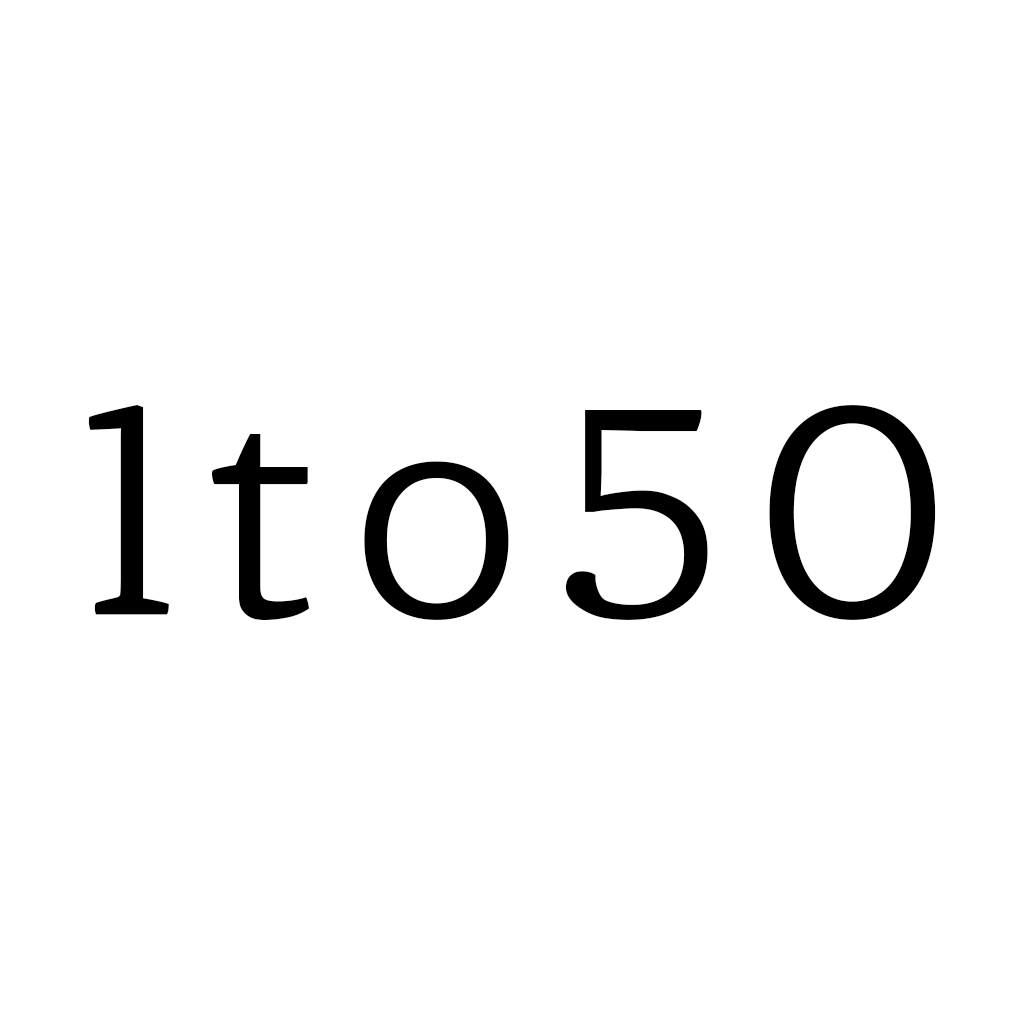
<style>
.page{position:relative;width:1024px;height:1024px;background:#ffffff}
.page>*{position:absolute;margin:0}
.t1{font:300px "MARUBuriBeta-Regular";letter-spacing:0.1em;color:#000000}
</style>
<div class="page">
<p class="t1" style="left:88px;top:405px;width:848px;height:215px">1to50</p>
</div>
